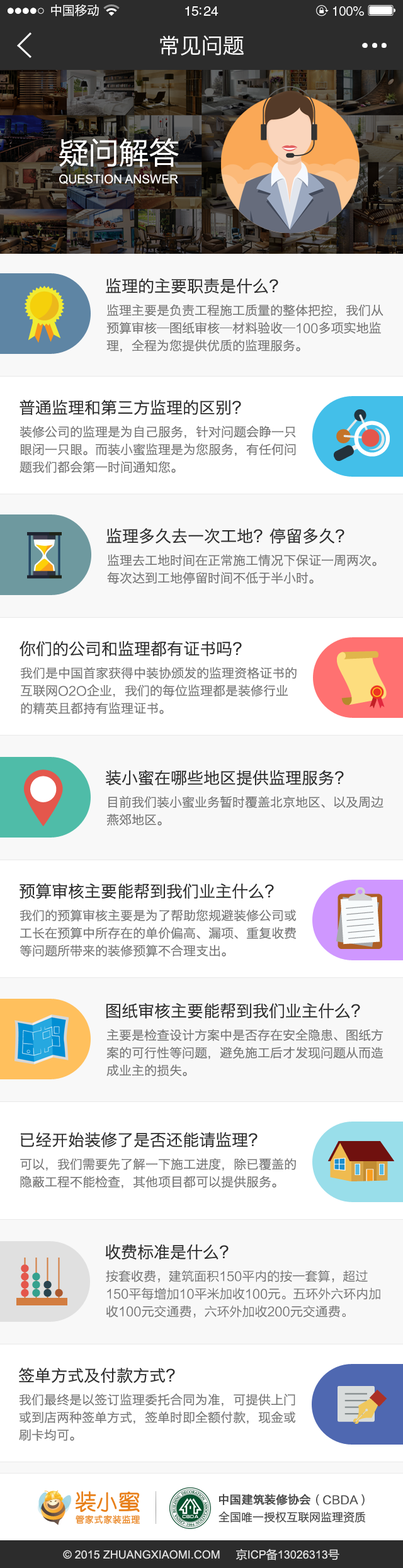
<style>
.page{position:relative;width:403px;height:1568px;background:#ffffff}
.page>*{position:absolute;margin:0}
.t1{font:12.6px "HiraginoSansGB-W3";letter-spacing:-0.02em;color:#ffffff}
.t2{font:13.5px "HelveticaLTStd-Roman";letter-spacing:-0.02em;color:#ffffff}
.t3{font:13px "HelveticaLTStd-Roman";letter-spacing:-0.02em;color:#ffffff}
.t4{font:21.4px "HiraginoSansGB-W3";color:#ffffff}
.t5{font:30.2px "FZLTHJW--GB1-0";color:#ffffff}
.t6{font:12.1px "ArialMT";color:#ffffff}
.t7{font:16.4px "HiraginoSansGB-W3";color:#2c2c2c}
.t8{font:12.6px/17.6px "HiraginoSansGB-W3";color:#737373}
.t9{font:12.6px/17.6px "FZLTXHK";color:#737373}
.t10{font:11.3px "HiraginoSansGB-W3";color:#464646;font-weight:bold}
.t11{font:11.3px "FZLTXHK";color:#464646;font-weight:bold}
.t12{font:11.3px "HiraginoSansGB-W3";color:#464646}
.t13{font:11.3px "ArialMT";color:#e2e2e2}
.t14{font:11.3px "MicrosoftYaHei";color:#e2e2e2}
</style>
<div class="page">
<p class="t1" style="left:51px;top:4px;width:48px;height:12px">中国移动</p>
<p class="t2" style="left:185px;top:6px;width:34px;height:10px">15:24</p>
<p class="t3" style="left:333px;top:6px;width:31px;height:10px">100%</p>
<p class="t4" style="left:160px;top:35px;width:84px;height:20px">常见问题</p>
<p class="t5" style="left:59px;top:138px;width:120px;height:29px">疑问解答</p>
<p class="t6" style="left:59px;top:174px;width:119px;height:11px">QUESTION ANSWER</p>
<p class="t7" style="left:106px;top:278px;width:172px;height:16px">监理的主要职责是什么？</p>
<p class="t8" style="left:106px;top:304px;width:277px;height:48px">监理主要是负责工程施工质量的整体把控，我们从预算审核—图纸审核—材料验收—<span class="t9">100</span>多项实地监理，全程为您提供优质的监理服务。</p>
<p class="t7" style="left:20px;top:400px;width:221px;height:16px">普通监理和第三方监理的区别？</p>
<p class="t8" style="left:20px;top:426px;width:276px;height:47px">装修公司的监理是为自己服务，针对问题会睁一只眼闭一只眼。而装小蜜监理是为您服务，有任何问题我们都会第一时间通知您。</p>
<p class="t7" style="left:106px;top:528px;width:238px;height:16px">监理多久去一次工地？停留多久？</p>
<p class="t8" style="left:107px;top:554px;width:270px;height:30px">监理去工地时间在正常施工情况下保证一周两次。每次达到工地停留时间不低于半小时。</p>
<p class="t7" style="left:20px;top:641px;width:222px;height:16px">你们的公司和监理都有证书吗？</p>
<p class="t8" style="left:21px;top:667px;width:276px;height:47px">我们是中国首家获得中装协颁发的监理资格证书的互联网<span class="t9">O2O</span>企业，我们的每位监理都是装修行业的精英且都持有监理证书。</p>
<p class="t7" style="left:106px;top:770px;width:238px;height:16px">装小蜜在哪些地区提供监理服务？</p>
<p class="t8" style="left:106px;top:796px;width:277px;height:30px">目前我们装小蜜业务暂时覆盖北京地区、以及周边燕郊地区。</p>
<p class="t7" style="left:20px;top:883px;width:254px;height:16px">预算审核主要能帮到我们业主什么？</p>
<p class="t8" style="left:20px;top:909px;width:276px;height:48px">我们的预算审核主要是为了帮助您规避装修公司或工长在预算中所存在的单价偏高、漏项、重复收费等问题所带来的装修预算不合理支出。</p>
<p class="t7" style="left:106px;top:1003px;width:254px;height:16px">图纸审核主要能帮到我们业主什么？</p>
<p class="t8" style="left:106px;top:1029px;width:277px;height:47px">主要是检查设计方案中是否存在安全隐患、图纸方案的可行性等问题，避免施工后才发现问题从而造成业主的损失。</p>
<p class="t7" style="left:21px;top:1132px;width:237px;height:16px">已经开始装修了是否还能请监理？</p>
<p class="t8" style="left:20px;top:1158px;width:276px;height:30px">可以，我们需要先了解一下施工进度，除已覆盖的隐蔽工程不能检查，其他项目都可以提供服务。</p>
<p class="t7" style="left:106px;top:1244px;width:123px;height:16px">收费标准是什么？</p>
<p class="t9" style="left:106px;top:1270px;width:274px;height:48px">按套收费，建筑面积150平内的按一套算，超过150平每增加10平米加收100元。五环外六环内加收100元交通费，六环外加收200元交通费。</p>
<p class="t7" style="left:19px;top:1368px;width:156px;height:15px">签单方式及付款方式？</p>
<p class="t8" style="left:19px;top:1394px;width:276px;height:47px">我们最终是以签订监理委托合同为准，可提供上门或到店两种签单方式，签单时即全额付款，现金或刷卡均可。</p>
<p class="t10" style="left:219px;top:1494px;width:146px;height:12px">中国建筑装修协会<span class="t11">（CBDA）</span></p>
<p class="t12" style="left:219px;top:1511px;width:146px;height:12px">全国唯一授权互联网监理资质</p>
<p class="t13" style="left:63px;top:1548px;width:276px;height:12px">© 2015 ZHUANGXIAOMI.COM     <span class="t14">京</span>ICP<span class="t14">备</span>13026313<span class="t14">号</span></p>
</div>
